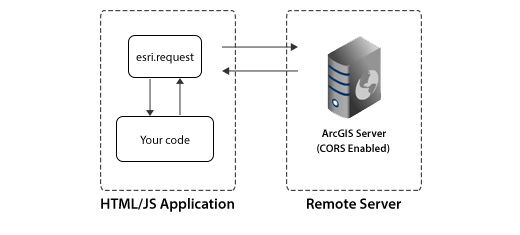
<style>
.page{position:relative;width:520px;height:235px;background:#ffffff}
.page>*{position:absolute;margin:0}
.t1{font:12px "MyriadPro-Regular";color:#000000}
.t2{font:11px "MyriadPro-Semibold";color:#000000}
.t3{font:15px "MyriadPro-Semibold";color:#000000}
</style>
<div class="page">
<p class="t1" style="left:136px;top:52px;width:58px;height:12px">esri.request</p>
<p class="t1" style="left:140px;top:135px;width:50px;height:9px">Your code</p>
<p class="t2" style="left:322px;top:129px;width:64px;height:8px">ArcGIS Server</p>
<p class="t2" style="left:317px;top:144px;width:73px;height:10px">(CORS Enabled)</p>
<p class="t3" style="left:101px;top:198px;width:133px;height:14px">HTML/JS Application</p>
<p class="t3" style="left:307px;top:198px;width:94px;height:11px">Remote Server</p>
</div>
